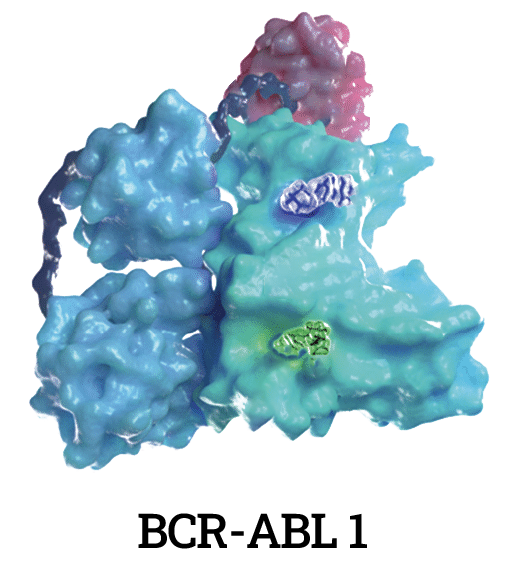
<style>
.page{position:relative;width:505px;height:564px;background:#ffffff}
.page>*{position:absolute;margin:0}
.t1{font:48px "RobotoSlab-Medium";letter-spacing:-0.025em;color:#000000}
</style>
<div class="page">
<p class="t1" style="left:138px;top:513px;width:229px;height:36px">BCR-ABL 1</p>
</div>
